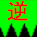
<style>
.page{position:relative;width:37px;height:37px;background:#00ff00}
.page>*{position:absolute;margin:0}
.t1{font:22.2px "MS-PGothic";color:#ff0000}
</style>
<div class="page">
<p class="t1" style="left:7px;top:0px;width:21px;height:21px">逆</p>
</div>
